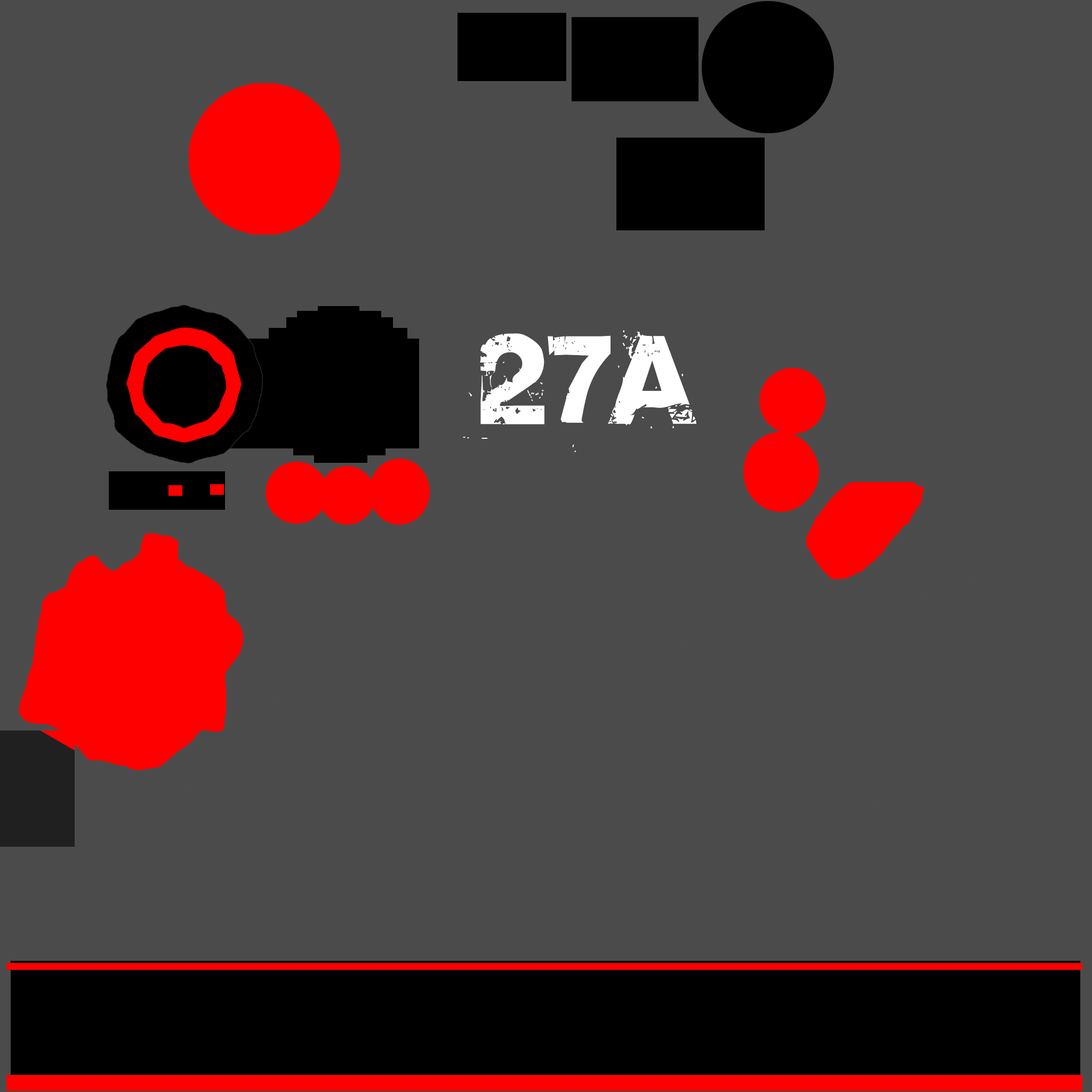
<style>
.page{position:relative;width:1092px;height:1092px;background:#4b4b4b}
.page>*{position:absolute;margin:0}
.t1{font:111.6px "Base02";color:#ffffff}
</style>
<div class="page">
<p class="t1" style="left:463px;top:330px;width:233px;height:122px">27A</p>
</div>
